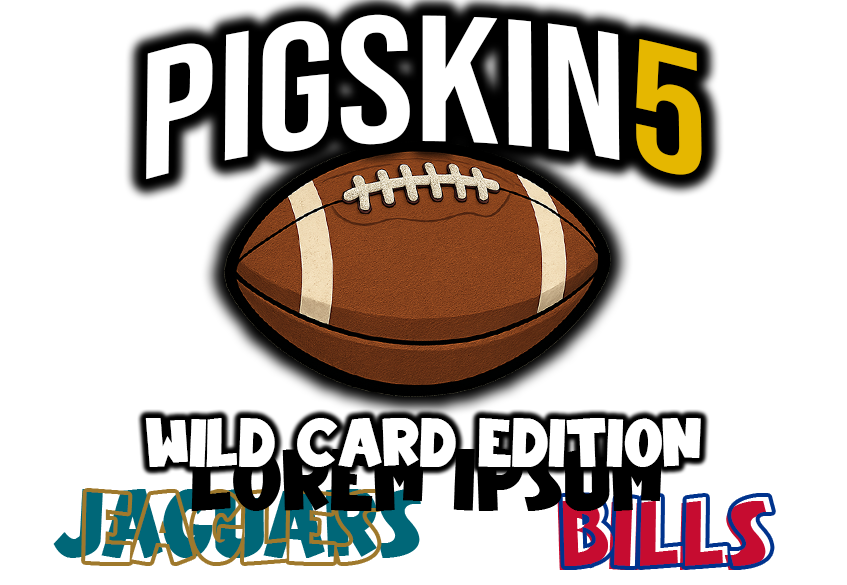
<style>
.page{position:relative;width:847px;height:585px;background:#ffffff}
.page>*{position:absolute;margin:0}
.t1{font:69.7px "EverySundayRegular";color:#ffffff}
.t2{font:90.3px "EverySundayRegular";color:#000000}
.t3{font:98.7px "EverySundayRegular";color:#006778}
.t4{font:98.7px "EverySundayRegular"}
.t5{font:98.7px "EverySundayRegular";color:#c60c30}
</style>
<div class="page">
<p class="t1" style="left:145px;top:418px;width:556px;height:49px">Wild card edition</p>
<p class="t2" style="left:191px;top:448px;width:471px;height:64px">Lorem Ipsum</p>
<p class="t3" style="left:53px;top:489px;width:368px;height:69px">Jaguars</p>
<p class="t4" style="left:562px;top:496px;width:210px;height:70px">Bills</p>
<p class="t5" style="left:557px;top:500px;width:210px;height:70px">Bills</p>
</div>
